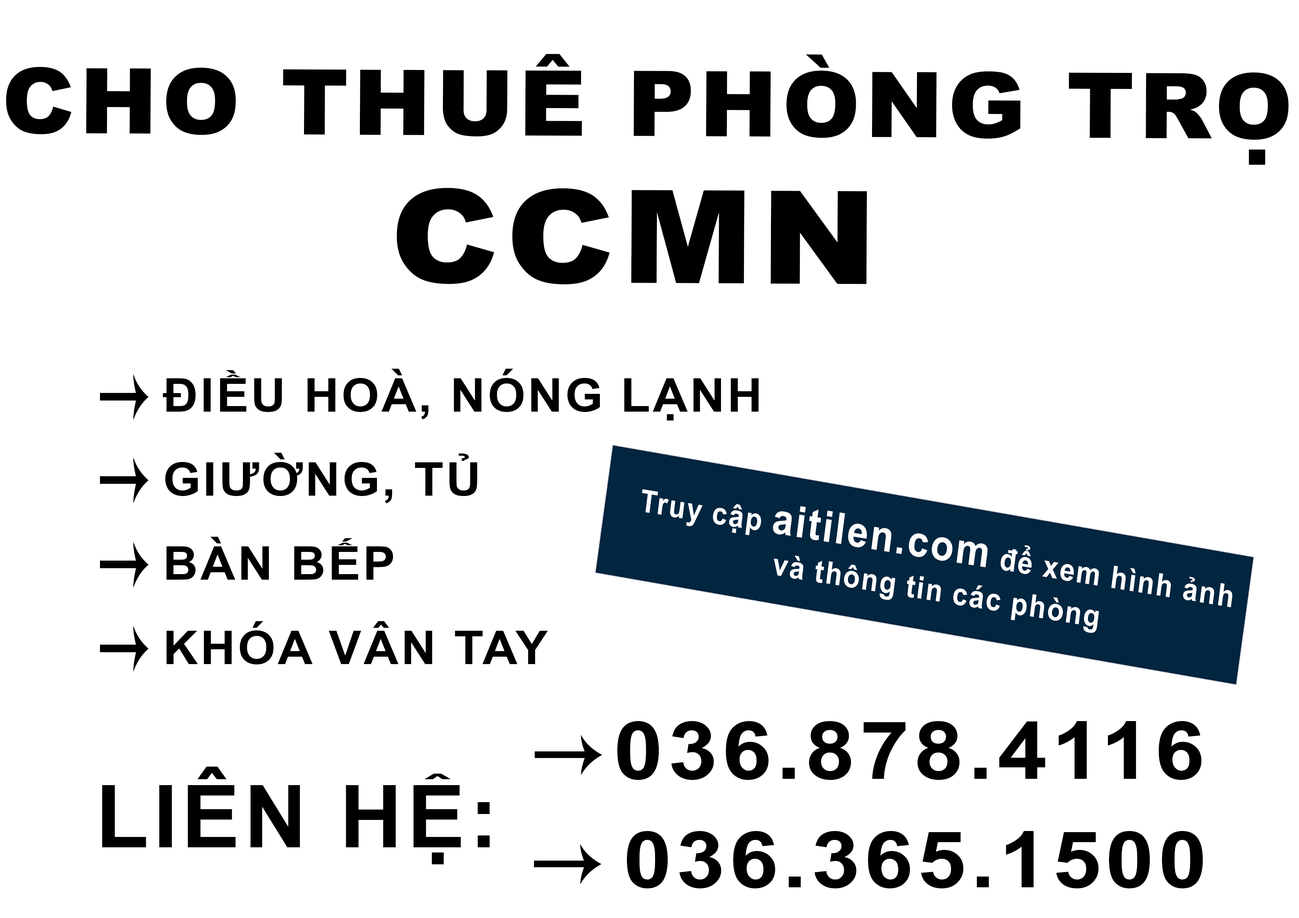
<style>
.page{position:relative;width:1299px;height:918px;background:#ffffff}
.page>*{position:absolute;margin:0}
.t1{font:90.9px "Arial-Black";letter-spacing:0.05em;color:#000000;scale:1.03 1}
.t2{font:76.9px "Arial-Black";letter-spacing:0.05em;color:#000000}
.t3{font:129.7px "Arial-Black";letter-spacing:0.05em;color:#000000;scale:1.08 1}
.t4{font:46.3px/21px "Arial-BoldMT";letter-spacing:0.05em;color:#000000;scale:1.04 1}
.t5{font:31px/10.3px "Arial-BoldMT";letter-spacing:0.05em;color:#fefefe;scale:0.89 1}
.t6{font:43.1px/10.3px "Arial-BoldMT";letter-spacing:0.05em;color:#fefefe;scale:0.89 1}
.t7{font:79.9px "Arial-BoldMT";letter-spacing:0.05em;color:#000000;scale:1.12 1}
.t8{font:86.9px "Arial-BoldMT";letter-spacing:0.05em;color:#000000}
.t9{font:78.3px "Arial-BoldMT";letter-spacing:0.05em;color:#000000;scale:1.12 1}
</style>
<div class="page">
<p class="t1" style="left:6px;top:54px;width:1282px;height:86px">CHO THUÊ PHÒNG TRO</p>
<p class="t2" style="left:1248px;top:150px;width:17px;height:15px">.</p>
<p class="t3" style="left:397px;top:188px;width:470px;height:97px">CCMN</p>
<p class="t4" style="left:163px;top:369px;width:596px;height:296px">ĐIỀU HOÀ, NÓNG LẠNH<br><br><br><br>GIƯỜNG, TỦ<br><br><br><br>BÀN BẾP<br><br><br><br>KHÓA VÂN TAY</p>
<p class="t5" style="left:642px;top:489px;width:590px;height:144px;text-align:center;rotate:9deg">Truy cập <span class="t6">aitilen.com</span> để xem hình ảnh <br><br><br><br>và thông tin các phòng</p>
<p class="t7" style="left:617px;top:721px;width:584px;height:59px">036.878.4116</p>
<p class="t8" style="left:102px;top:767px;width:388px;height:97px">LIÊN HỆ:</p>
<p class="t9" style="left:626px;top:831px;width:577px;height:58px">036.365.1500</p>
</div>
